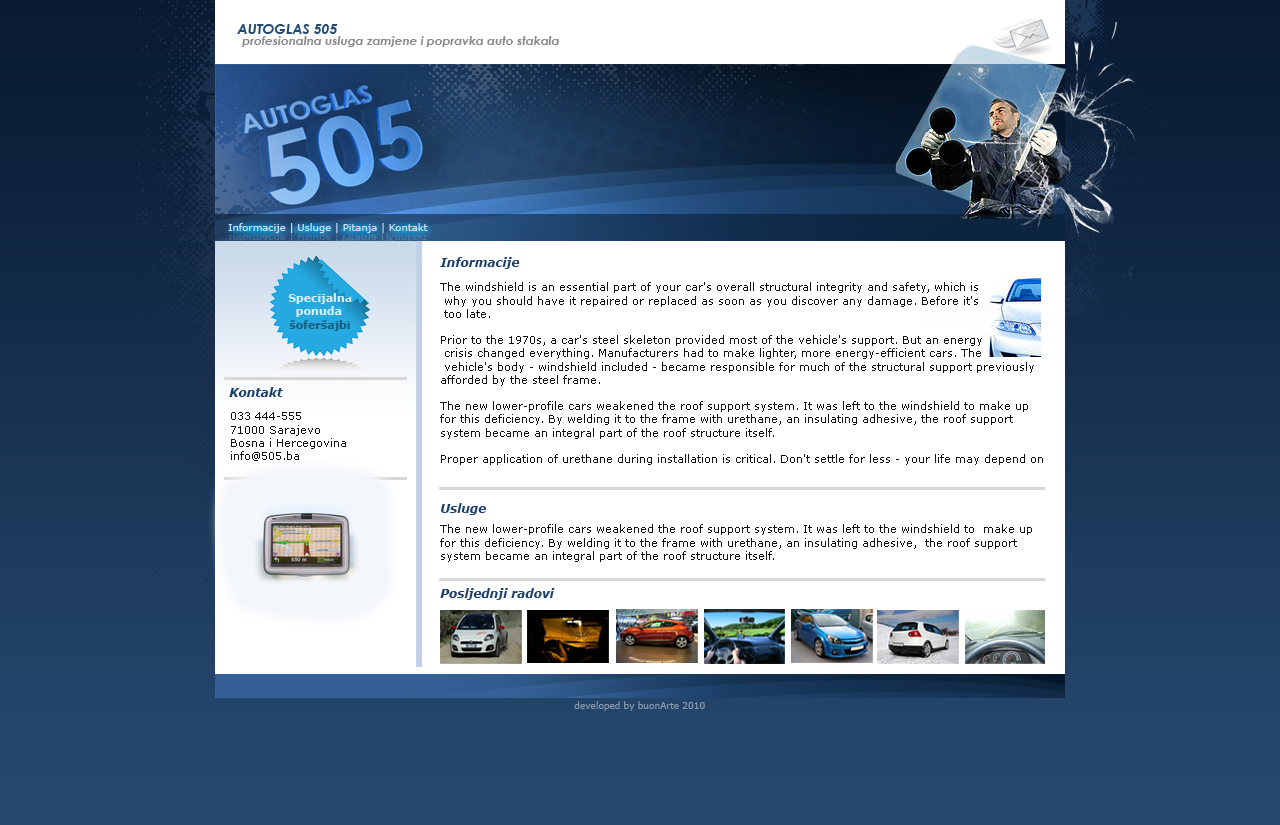
<style>
.page{position:relative;width:1280px;height:825px;background:#ffffff}
.page>*{position:absolute;margin:0}
.t1{font:14px "CenturyGothic-BoldItalic";color:#244b74}
.t2{font:12px "CenturyGothic-BoldItalic";color:#898989}
.t3{font:10px "Verdana";color:#cae0f9}
.t4{font:12px "Verdana-BoldItalic";color:#1b406c}
.t5{font:11px "Verdana";color:#111111}
.t6{font:11px "Verdana-Bold";color:#165f7f}
.t7{font:9px "Verdana";color:#8698ad}
</style>
<div class="page">
<p class="t1" style="left:237px;top:24px;width:101px;height:10px">АUTOGLAS 505</p>
<p class="t2" style="left:242px;top:36px;width:317px;height:11px">profesionalna usluga zamjene i popravka auto stakala</p>
<p class="t3" style="left:228px;top:223px;width:200px;height:10px">Informacije | Usluge | Pitanja | Kontakt</p>
<p class="t4" style="left:440px;top:257px;width:80px;height:12px">Informacije</p>
<p class="t5" style="left:440px;top:282px;width:603px;height:183px">The windshield is an essential part of your car's overall structural integrity and safety, which is<br> why you should have it repaired or replaced as soon as you discover any damage. Before it's<br> too late.<br><br>Prior to the 1970s, a car's steel skeleton provided most of the vehicle's support. But an energy<br> crisis changed everything. Manufacturers had to make lighter, more energy-efficient cars. The<br> vehicle's body - windshield included - became responsible for much of the structural support previously afforded by the steel frame.<br><br>The new lower-profile cars weakened the roof support system. It was left to the windshield to make up for this deficiency. By welding it to the frame with urethane, an insulating adhesive, the roof support system became an integral part of the roof structure itself.<br><br>Proper application of urethane during installation is critical. Don't settle for less - your life may depend on it!<br>Your Windshield and Road Safety<br><br>Given its new function, the windshield takes on a vital importance with regard to the safety of the driver and passengers, whenever an impact occurs. The repair or replacement of a windshield must meet Federal Motor Vehicles Safety Standards, which are tested as follows:</p>
<p class="t6" style="left:289px;top:320px;width:61px;height:11px">šoferšajbi</p>
<p class="t4" style="left:229px;top:387px;width:54px;height:10px">Kontakt</p>
<p class="t5" style="left:231px;top:412px;width:115px;height:49px">033 444-555<br>71000 Sarajevo<br>Bosna i Hercegovina<br>info@505.ba</p>
<p class="t4" style="left:441px;top:503px;width:45px;height:12px">Usluge</p>
<p class="t5" style="left:440px;top:524px;width:592px;height:38px">The new lower-profile cars weakened the roof support system. It was left to the windshield to  make up for this deficiency. By welding it to the frame with urethane, an insulating adhesive,  the roof support system became an integral part of the roof structure itself.</p>
<p class="t4" style="left:440px;top:588px;width:115px;height:12px">Posljednji radovi</p>
<p class="t7" style="left:574px;top:701px;width:131px;height:10px">developed by buonArte 2010</p>
</div>
